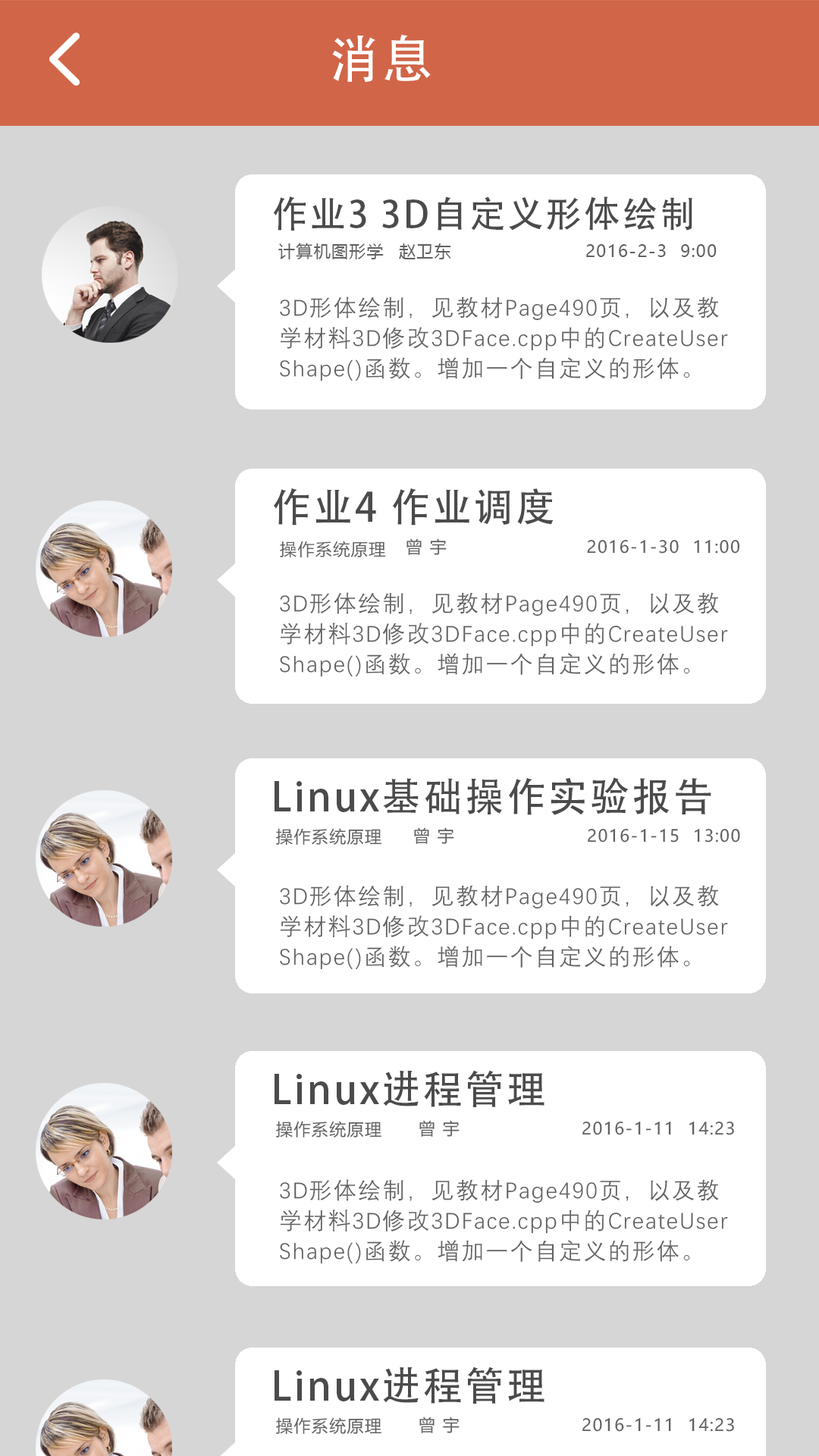
<style>
.page{position:relative;width:819px;height:1456px;background:#ffffff}
.page>*{position:absolute;margin:0}
.t1{font:50.8px "AdobeHeitiStd-Regular";letter-spacing:0.06em;color:#ffffff}
.t2{font:36.4px "AdobeHeitiStd-Regular";letter-spacing:0.06em;color:#4c4b4b}
.t3{font:16.7px "MicrosoftYaHei";letter-spacing:0.06em;color:#616161}
.t4{font:22.7px/30.3px "DengXian-Regular";letter-spacing:0.06em;color:#616161}
.t5{font:28.8px/30.3px "DengXian-Regular";letter-spacing:0.06em;color:#616161}
.t6{font:39.8px "AdobeHeitiStd-Regular";letter-spacing:0.06em;color:#4c4b4b}
.t7{font:16.6px "MicrosoftYaHei";letter-spacing:0.06em;color:#616161}
.t8{font:28.8px/39.4px "DengXian-Regular";letter-spacing:0.06em;color:#616161}
</style>
<div class="page">
<p class="t1" style="left:332px;top:34px;width:99px;height:48px">消息</p>
<p class="t2" style="left:273px;top:196px;width:420px;height:35px">作业3 3D自定义形体绘制</p>
<p class="t3" style="left:278px;top:243px;width:106px;height:16px">计算机图形学</p>
<p class="t3" style="left:399px;top:243px;width:52px;height:16px">赵卫东</p>
<p class="t3" style="left:586px;top:244px;width:131px;height:13px">2016-2-3  9:00</p>
<p class="t4" style="left:280px;top:297px;width:448px;height:84px"><span class="t5"><br></span>3D形体绘制，见教材Page490页，以及教<br>学材料3D修改3DFace.cpp中的CreateUser<br>Shape()函数。增加一个自定义的形体。</p>
<p class="t6" style="left:273px;top:488px;width:281px;height:38px">作业4 作业调度</p>
<p class="t3" style="left:280px;top:541px;width:106px;height:16px">操作系统原理</p>
<p class="t7" style="left:406px;top:538px;width:41px;height:17px">曾 宇</p>
<p class="t7" style="left:587px;top:539px;width:153px;height:15px">2016-1-30  11:00</p>
<p class="t4" style="left:280px;top:592px;width:448px;height:85px"><span class="t8"><br></span>3D形体绘制，见教材Page490页，以及教<br>学材料3D修改3DFace.cpp中的CreateUser<br>Shape()函数。增加一个自定义的形体。</p>
<p class="t6" style="left:275px;top:777px;width:436px;height:38px">Linux基础操作实验报告</p>
<p class="t7" style="left:276px;top:828px;width:105px;height:18px">操作系统原理</p>
<p class="t7" style="left:414px;top:827px;width:40px;height:17px">曾 宇</p>
<p class="t7" style="left:588px;top:828px;width:152px;height:14px">2016-1-15  13:00</p>
<p class="t4" style="left:280px;top:885px;width:448px;height:85px"><span class="t5"><br></span>3D形体绘制，见教材Page490页，以及教<br>学材料3D修改3DFace.cpp中的CreateUser<br>Shape()函数。增加一个自定义的形体。</p>
<p class="t6" style="left:275px;top:1070px;width:269px;height:37px">Linux进程管理</p>
<p class="t7" style="left:276px;top:1121px;width:105px;height:17px">操作系统原理</p>
<p class="t7" style="left:419px;top:1120px;width:41px;height:17px">曾 宇</p>
<p class="t7" style="left:582px;top:1121px;width:152px;height:14px">2016-1-11  14:23</p>
<p class="t4" style="left:280px;top:1179px;width:448px;height:85px"><span class="t8"><br></span>3D形体绘制，见教材Page490页，以及教<br>学材料3D修改3DFace.cpp中的CreateUser<br>Shape()函数。增加一个自定义的形体。</p>
<p class="t6" style="left:275px;top:1366px;width:269px;height:38px">Linux进程管理</p>
<p class="t7" style="left:276px;top:1417px;width:105px;height:18px">操作系统原理</p>
<p class="t7" style="left:419px;top:1417px;width:41px;height:16px">曾 宇</p>
<p class="t7" style="left:582px;top:1417px;width:152px;height:15px">2016-1-11  14:23</p>
</div>
